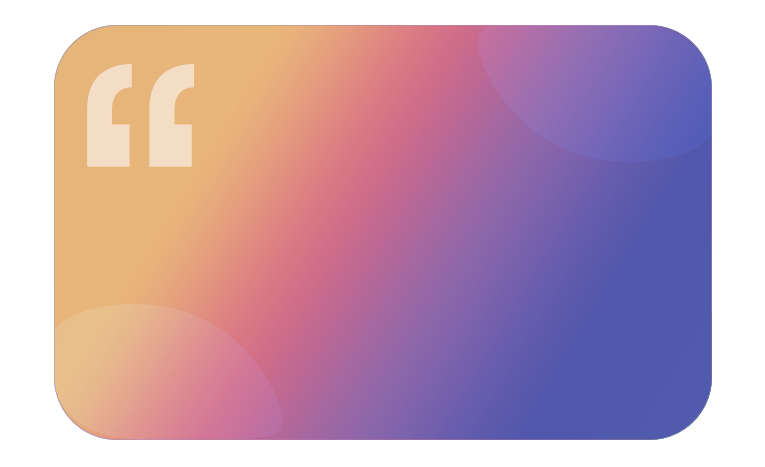
<style>
.page{position:relative;width:765px;height:467px;background:#ffffff}
.page>*{position:absolute;margin:0}
.t1{font:284.5px "Anantason-SemiBoldWd87";color:#f3ddc5}
</style>
<div class="page">
<p class="t1" style="left:87px;top:64px;width:107px;height:103px">“</p>
</div>
